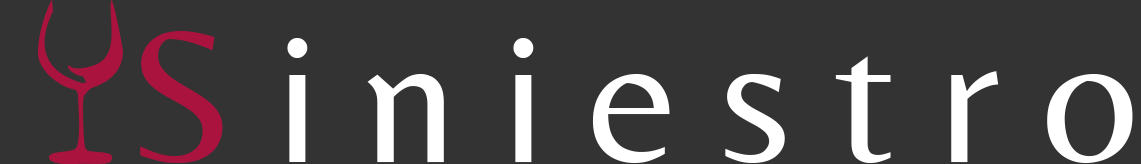
<style>
.page{position:relative;width:1141px;height:164px;background:#333333}
.page>*{position:absolute;margin:0}
.t1{font:192px "Belleza-Regular";letter-spacing:0.22em;color:#ffffff}
.t2{font:192px "Belleza-Regular";letter-spacing:0.22em;color:#a9133e}
</style>
<div class="page">
<p class="t1" style="left:140px;top:30px;width:993px;height:133px"><span class="t2">S</span>iniestro</p>
</div>
